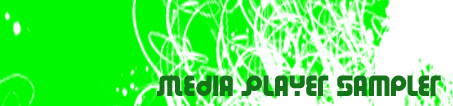
<style>
.page{position:relative;width:453px;height:106px;background:#00f900}
.page>*{position:absolute;margin:0}
.t1{font:30px "DendriticVoltage";color:#157419}
</style>
<div class="page">
<p class="t1" style="left:157px;top:75px;width:284px;height:21px">Media Player Sampler</p>
</div>
